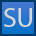
<style>
.page{position:relative;width:36px;height:36px;background:#003868}
.page>*{position:absolute;margin:0}
.t1{font:27.3px "MyriadPro-Regular";color:#d7d7d7}
</style>
<div class="page">
<p class="t1" style="left:4px;top:8px;width:28px;height:19px">SU</p>
</div>
